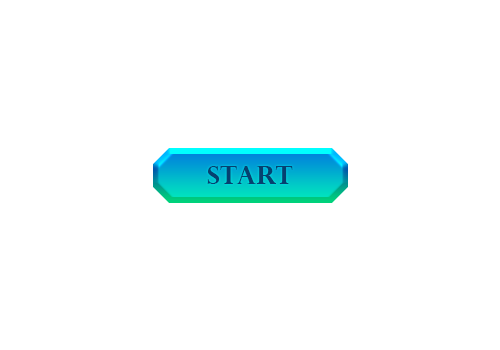
<style>
.page{position:relative;width:500px;height:350px;background:#ffffff}
.page>*{position:absolute;margin:0}
.t1{font:25.4px "PerpetuaTitlingMT-Bold";color:#064070}
</style>
<div class="page">
<p class="t1" style="left:207px;top:166px;width:86px;height:18px">START</p>
</div>
